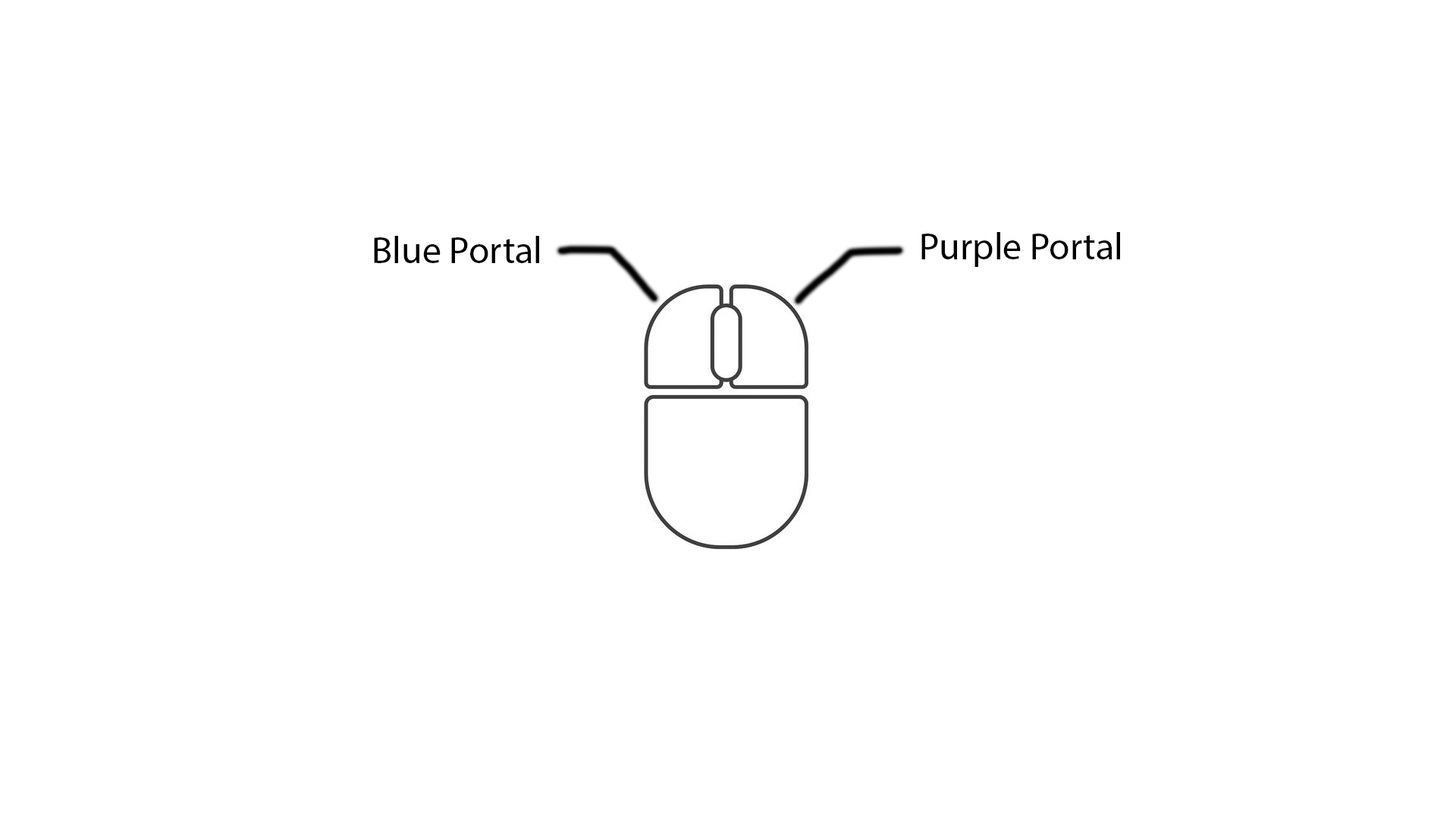
<style>
.page{position:relative;width:1456px;height:819px;background:#ffffff}
.page>*{position:absolute;margin:0}
.t1{font:37.9px "MyriadPro-Regular";color:#000000}
</style>
<div class="page">
<p class="t1" style="left:921px;top:232px;width:199px;height:35px">Purple Portal</p>
<p class="t1" style="left:374px;top:236px;width:165px;height:27px">Blue Portal</p>
</div>
